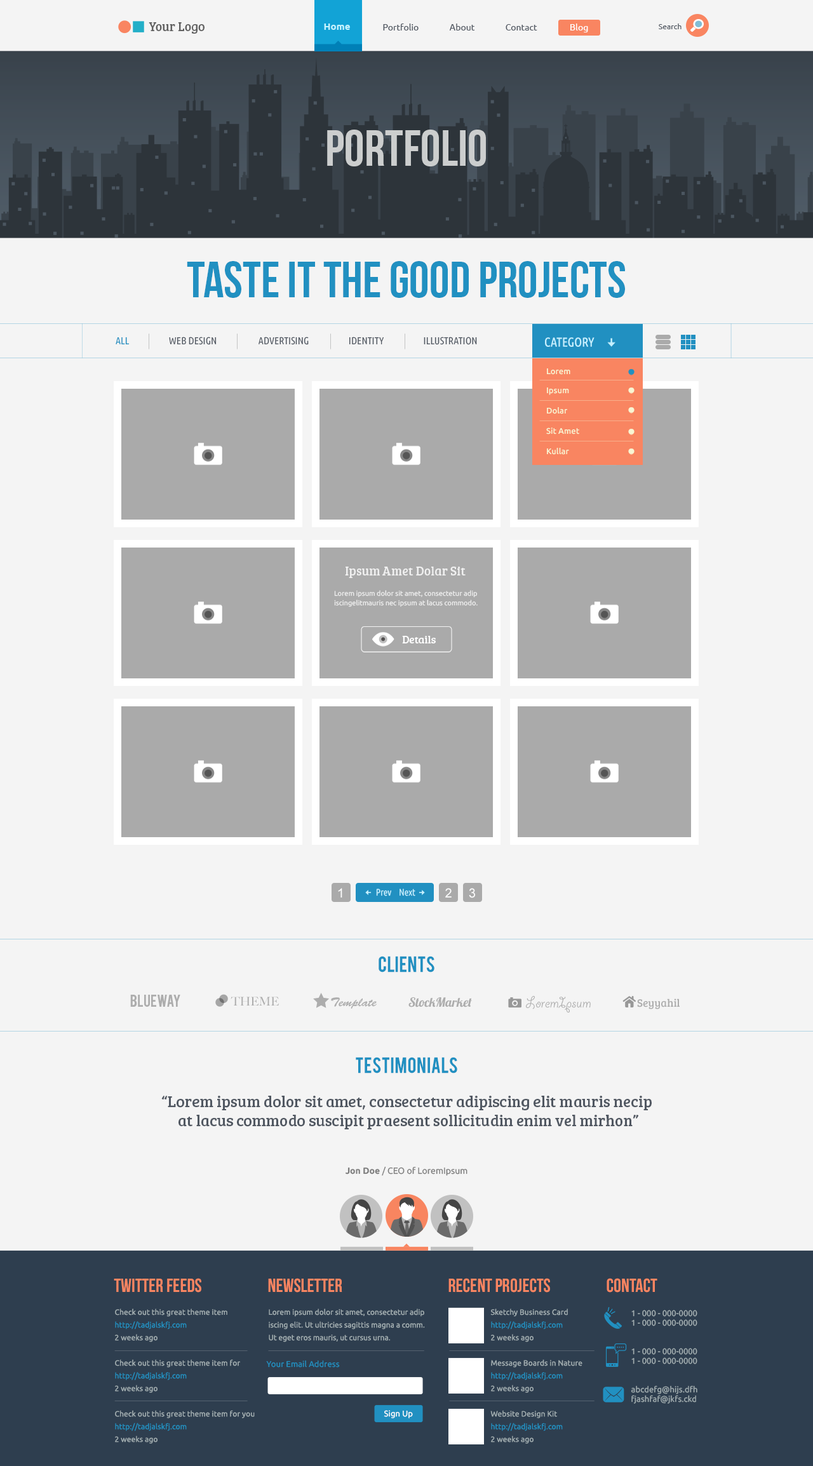
<style>
.page{position:relative;width:813px;height:1466px;background:#f4f4f4}
.page>*{position:absolute;margin:0}
.t1{font:12.7px "BreeSerif-Regular";color:#606060}
.t2{font:9.5px "Ubuntu-Bold";color:#c5f4ff}
.t3{font:8.9px "Ubuntu";color:#515862}
.t4{font:8.9px "Ubuntu";color:#ffffff}
.t5{font:7.6px "Ubuntu";color:#515862}
.t6{font:50.8px "BebasNeue";color:#cccece}
.t7{font:50.8px "BebasNeue";color:#2190c1}
.t8{font:10.2px "UbuntuCondensed-Regular";color:#515862}
.t9{font:10.2px "UbuntuCondensed-Regular";color:#2190c1}
.t10{font:12.7px "UbuntuCondensed-Regular";color:#c5f0ff}
.t11{font:8.3px/20.3px "Ubuntu-Medium";color:#f9f5d2}
.t12{font:8.3px/19.1px "Ubuntu-Medium";color:#f9f5d2}
.t13{font:12.7px "BreeSerif-Regular";color:#f0f0f0}
.t14{font:7px/9.5px "Ubuntu";color:#f0f0f0}
.t15{font:10.8px "BreeSerif-Regular";color:#ffffff}
.t16{font:12.7px "ArialMT";color:#fefefe}
.t17{font:9.5px "UbuntuCondensed-Regular";color:#c5f0ff}
.t18{font:17.2px "Bebas";color:#2190c1}
.t19{font:13.4px "Bebas";color:#adadad}
.t20{font:11.9px "BigCaslon-Medium";color:#adadad}
.t21{font:12.6px "BrushScriptStd";color:#adadad}
.t22{font:12.7px "Lobster1.4";color:#adadad}
.t23{font:16.5px "GiddyupStd";color:#adadad}
.t24{font:11px "BreeSerif-Regular";color:#adadad}
.t25{font:15.9px "BreeSerif-Regular";color:#515862}
.t26{font:8.9px "Ubuntu";color:#7e7e7e}
.t27{font:8.9px "Ubuntu-Bold";color:#7e7e7e}
.t28{font:19.1px "BebasNeue";color:#f98561}
.t29{font:7.6px/12.7px "Ubuntu";letter-spacing:0.008em;color:#a3afb2}
.t30{font:7.6px/12.7px "Ubuntu";letter-spacing:0.008em;color:#2190c1}
.t31{font:7.6px/12.7px "Ubuntu";color:#a3afb2}
.t32{font:8.3px/9.5px "Ubuntu";color:#a3afb2}
.t33{font:8.3px "Ubuntu";letter-spacing:0.008em;color:#2190c1}
.t34{font:8.3px/9.5px "Ubuntu";letter-spacing:0.008em;color:#a3afb2}
.t35{font:8.3px "Ubuntu";letter-spacing:0.008em;color:#ffffff}
</style>
<div class="page">
<p class="t1" style="left:149px;top:22px;width:56px;height:12px">Your Logo</p>
<p class="t2" style="left:324px;top:24px;width:26px;height:6px">Home</p>
<p class="t3" style="left:383px;top:24px;width:154px;height:6px">Portfolio               About               Contact</p>
<p class="t4" style="left:571px;top:24px;width:17px;height:8px">Blog</p>
<p class="t5" style="left:659px;top:24px;width:23px;height:5px">Search</p>
<p class="t6" style="left:327px;top:130px;width:159px;height:36px">PORTFOLIO</p>
<p class="t7" style="left:187px;top:261px;width:438px;height:37px">TASTE IT THE GOOD PROJECTS</p>
<p class="t8" style="left:116px;top:337px;width:361px;height:8px"><span class="t9">ALL</span>                    WEB DESIGN                     ADVERTISING                    IDENTITY                    ILLUSTRATION</p>
<p class="t10" style="left:545px;top:337px;width:50px;height:10px">CATEGORY</p>
<p class="t11" style="left:546px;top:368px;width:33px;height:87px"><span class="t12">Lorem<br>Ipsum<br></span>Dolar<br>Sit Amet<br>Kullar</p>
<p class="t13" style="left:345px;top:567px;width:121px;height:11px">Ipsum Amet Dolar Sit</p>
<p class="t14" style="left:334px;top:590px;width:144px;height:17px">Lorem ipsum dolor sit amet, consectetur adip <br>iscingelitmauris nec ipsum at lacus commodo.</p>
<p class="t15" style="left:402px;top:636px;width:34px;height:8px">Details</p>
<p class="t16" style="left:338px;top:888px;width:4px;height:10px">1</p>
<p class="t17" style="left:376px;top:889px;width:40px;height:7px">Prev    Next</p>
<p class="t16" style="left:445px;top:888px;width:7px;height:10px">2</p>
<p class="t16" style="left:469px;top:888px;width:6px;height:10px">3</p>
<p class="t18" style="left:379px;top:956px;width:56px;height:17px">CLIENTS</p>
<p class="t19" style="left:130px;top:995px;width:50px;height:12px">BLUEWAY</p>
<p class="t20" style="left:231px;top:997px;width:49px;height:9px">THEME</p>
<p class="t21" style="left:331px;top:997px;width:46px;height:12px">Template</p>
<p class="t22" style="left:409px;top:997px;width:63px;height:11px">StockMarket</p>
<p class="t23" style="left:526px;top:996px;width:65px;height:17px">LoremIpsum</p>
<p class="t24" style="left:637px;top:999px;width:43px;height:11px">Seyyahil</p>
<p class="t18" style="left:356px;top:1057px;width:101px;height:17px">Testimonials</p>
<p class="t25" style="left:161px;top:1096px;width:491px;height:34px;text-align:center">“Lorem ipsum dolor sit amet, consectetur adipiscing elit mauris necip <br>at lacus commodo suscipit praesent sollicitudin enim vel mirhon”</p>
<p class="t26" style="left:346px;top:1166px;width:122px;height:10px"><span class="t27">Jon Doe</span> / CEO of LoremIpsum</p>
<p class="t28" style="left:114px;top:1278px;width:87px;height:15px">Twitter FEEDs</p>
<p class="t28" style="left:268px;top:1278px;width:74px;height:15px">NEWSLETTER</p>
<p class="t28" style="left:449px;top:1278px;width:101px;height:15px">recent projects</p>
<p class="t28" style="left:607px;top:1278px;width:51px;height:15px">Contact</p>
<p class="t29" style="left:115px;top:1309px;width:140px;height:135px">Check out this great theme item<br><span class="t30">http://tadjalskfj.com<br></span>2 weeks ago<br><br>Check out this great theme item for<br><span class="t30">http://tadjalskfj.com <br></span>2 weeks ago<br><br>Check out this great theme item for you<br><span class="t30">http://tadjalskfj.com <br></span>2 weeks ago</p>
<p class="t31" style="left:269px;top:1309px;width:156px;height:33px">Lorem ipsum dolor sit amet, consectetur adip<br>iscing elit. Ut ultricies sagittis magna a comm. <br>Ut eget eros mauris, ut cursus urna.</p>
<p class="t29" style="left:490px;top:1309px;width:93px;height:135px">Sketchy Business Card<br><span class="t30">http://tadjalskfj.com<br></span>2 weeks ago<br><br>Message Boards in Nature<br><span class="t30">http://tadjalskfj.com<br></span>2 weeks ago<br><br>Website Design Kit<br><span class="t30">http://tadjalskfj.com<br></span>2 weeks ago</p>
<p class="t32" style="left:632px;top:1310px;width:66px;height:17px">1 - 000 - 000-0000<br>1 - 000 - 000-0000</p>
<p class="t32" style="left:632px;top:1348px;width:66px;height:17px">1 - 000 - 000-0000<br>1 - 000 - 000-0000</p>
<p class="t33" style="left:266px;top:1360px;width:74px;height:8px">Your Email Address</p>
<p class="t34" style="left:631px;top:1386px;width:67px;height:18px">abcdefg@hijs.dfh<br>fjashfaf@jkfs.ckd</p>
<p class="t35" style="left:384px;top:1410px;width:29px;height:9px">Sign Up</p>
</div>
